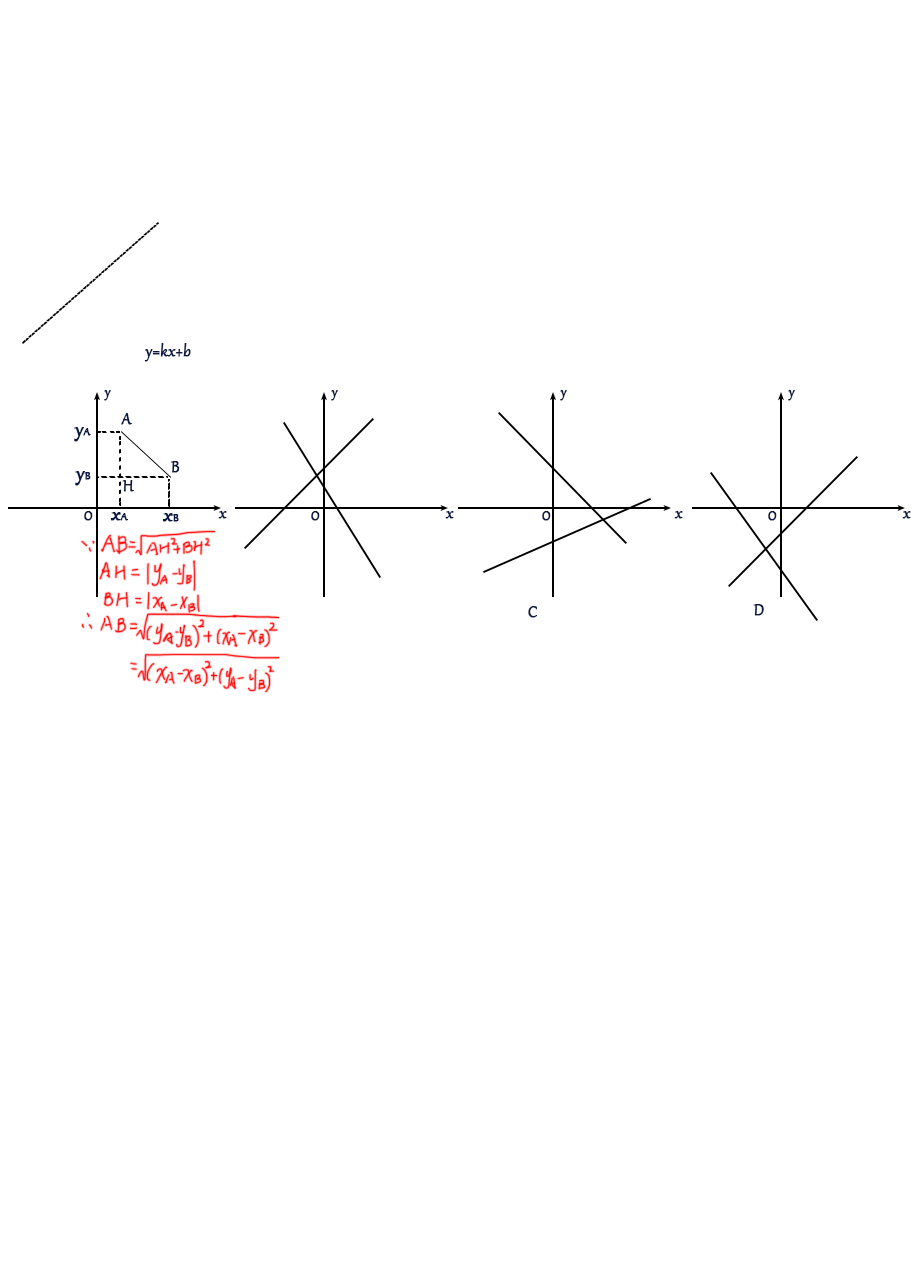
<style>
.page{position:relative;width:916px;height:1268px;background:#ffffff}
.page>*{position:absolute;margin:0}
.t1{font:18.7px "Gabriola";color:#081842;font-weight:bold}
.t2{font:16px "Gabriola";color:#081842;font-weight:bold}
.t3{font:24px "Gabriola";color:#081842;font-weight:bold}
.t4{font:13.3px "Gabriola";color:#081842;font-weight:bold}
</style>
<div class="page">
<p class="t1" style="left:144px;top:343px;width:47px;height:19px">y=kx+b</p>
<p class="t2" style="left:104px;top:390px;width:7px;height:11px">y</p>
<p class="t2" style="left:331px;top:390px;width:7px;height:11px">y</p>
<p class="t2" style="left:560px;top:390px;width:7px;height:11px">y</p>
<p class="t2" style="left:788px;top:390px;width:7px;height:11px">y</p>
<p class="t1" style="left:121px;top:413px;width:11px;height:12px">A</p>
<p class="t3" style="left:74px;top:427px;width:17px;height:15px">y<span class="t4">A</span></p>
<p class="t1" style="left:170px;top:461px;width:10px;height:12px">B</p>
<p class="t3" style="left:75px;top:471px;width:16px;height:15px">y<span class="t4">B</span></p>
<p class="t1" style="left:122px;top:480px;width:12px;height:12px">H</p>
<p class="t2" style="left:84px;top:511px;width:9px;height:10px">O</p>
<p class="t3" style="left:110px;top:512px;width:18px;height:9px">x<span class="t4">A</span></p>
<p class="t3" style="left:162px;top:513px;width:17px;height:9px">x<span class="t4">B</span></p>
<p class="t1" style="left:218px;top:511px;width:9px;height:8px">x</p>
<p class="t2" style="left:311px;top:511px;width:9px;height:10px">O</p>
<p class="t1" style="left:445px;top:511px;width:9px;height:8px">x</p>
<p class="t2" style="left:542px;top:511px;width:9px;height:10px">O</p>
<p class="t1" style="left:674px;top:511px;width:9px;height:8px">x</p>
<p class="t2" style="left:768px;top:511px;width:9px;height:10px">O</p>
<p class="t1" style="left:902px;top:511px;width:9px;height:8px">x</p>
<p class="t1" style="left:528px;top:606px;width:10px;height:12px">C</p>
<p class="t1" style="left:753px;top:604px;width:11px;height:12px">D</p>
</div>
